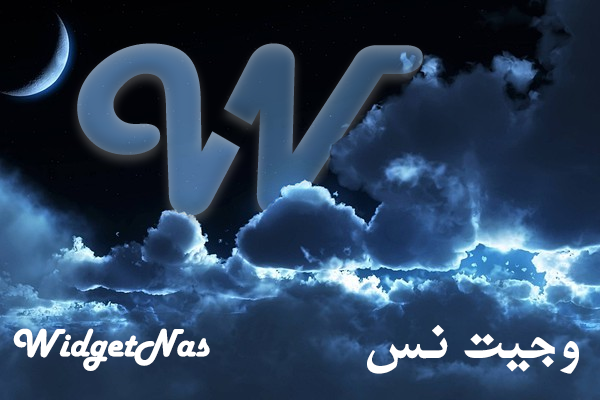
<style>
.page{position:relative;width:600px;height:400px}
.page>*{position:absolute;margin:0}
.t1{font:245.7px "HarlowSolid";scale:1.12 1}
.t2{font:40.9px "HarlowSolid";color:#ffffff}
.t3{font:55.2px "AMitra_4MRT-Bold";color:#ffffff}
</style>
<div class="page">
<p class="t1" style="left:77px;top:43px;width:346px;height:173px">W</p>
<p class="t1" style="left:77px;top:43px;width:346px;height:173px">W</p>
<p class="t2" style="left:13px;top:328px;width:197px;height:43px">WidgetNas</p>
<p class="t3" style="left:367px;top:325px;width:212px;height:49px">وجیت نس</p>
</div>
